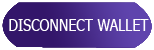
<style>
.page{position:relative;width:154px;height:50px;background:#ffffff}
.page>*{position:absolute;margin:0}
.t1{font:16.5px "Tahoma";color:#ffffff;scale:0.86 1}
</style>
<div class="page">
<p class="t1" style="left:9px;top:19px;width:140px;height:12px">DISCONNECT WALLET</p>
</div>
